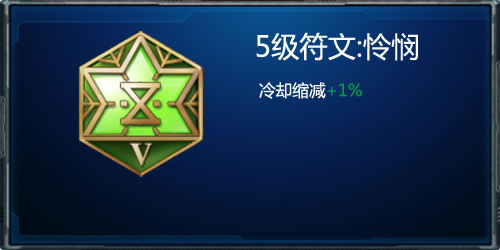
<style>
.page{position:relative;width:500px;height:250px}
.page>*{position:absolute;margin:0}
.t1{font:28.3px "MicrosoftYaHei";color:#f7faf8}
.t2{font:16.7px "MicrosoftYaHei";color:#f7faf8}
.t3{font:16.7px "MicrosoftYaHei";color:#009944}
</style>
<div class="page">
<p class="t1" style="left:256px;top:32px;width:162px;height:67px;text-align:center">5级符文:怜悯<br><span class="t2">  冷却缩减</span><span class="t3">+1%</span></p>
</div>
